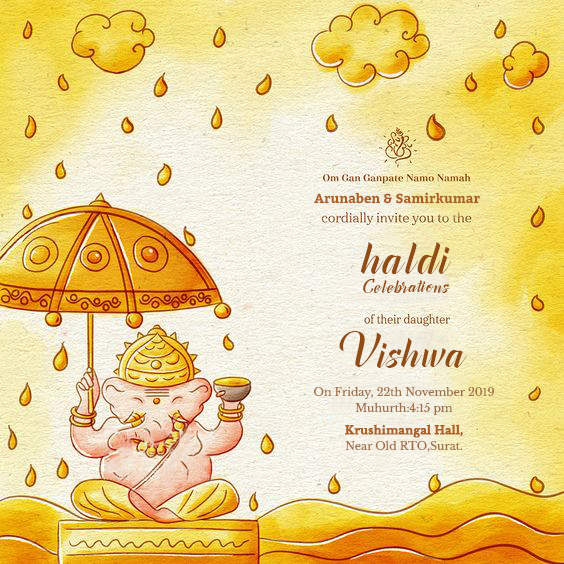
<style>
.page{position:relative;width:564px;height:564px}
.page>*{position:absolute;margin:0}
.t1{font:13px "Bitter-Bold";color:#ab5f25}
.t2{font:60px "CanelaBarkBoldPersonalUse";letter-spacing:0.04em;color:#914c15}
.t3{font:24px "CanelaBarkBoldPersonalUse";letter-spacing:0.04em;color:#914c15}
.t4{font:55px "CanelaBarkBoldPersonalUse";letter-spacing:0.04em;color:#914c15}
.t5{font:11px/16px "LibreBaskerville-Regular";color:#9e6e48}
.t6{font:11px/16px "LibreBaskerville-Bold";color:#ab5f25;font-weight:bold}
</style>
<div class="page">
<p class="t1" style="left:314px;top:192px;width:166px;height:12px">Arunaben &amp; Samirkumar</p>
<p class="t2" style="left:360px;top:242px;width:92px;height:32px">haldi</p>
<p class="t3" style="left:363px;top:278px;width:87px;height:15px">Celebrations</p>
<p class="t4" style="left:339px;top:331px;width:128px;height:37px">Vishwa</p>
<p class="t5" style="left:314px;top:386px;width:180px;height:29px;text-align:center">On Friday, 22th November 2019<br>Muhurth:4:15 pm</p>
<p class="t5" style="left:345px;top:424px;width:118px;height:28px;text-align:center"><span class="t6">Krushimangal Hall,<br></span>Near Old RTO,Surat.</p>
</div>
